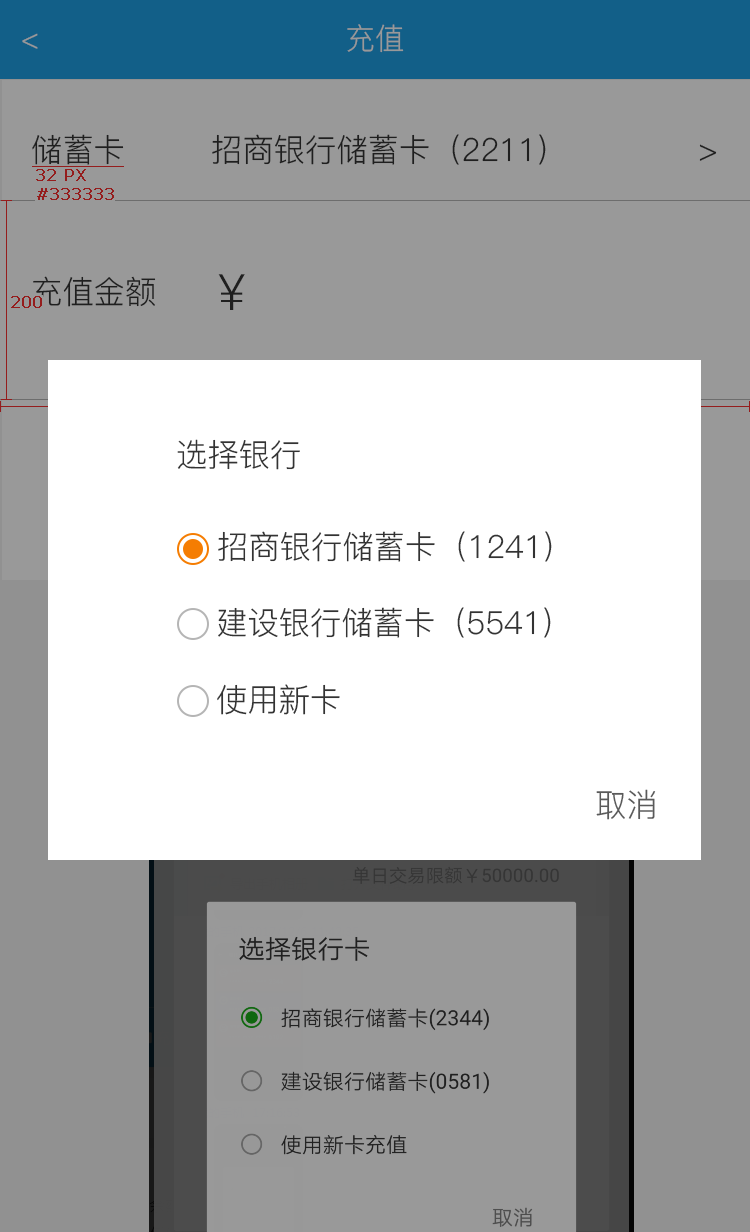
<style>
.page{position:relative;width:750px;height:1232px;background:#ffffff}
.page>*{position:absolute;margin:0}
.t1{font:30px "PingFang-SC-Regular";color:#999999}
.t2{font:32px "PingFang-SC-Regular";color:#333333}
.t3{font:16px "Verdana";color:#951d1d;font-weight:bold}
.t4{font:50px "PingFang-SC-Regular";color:#333333}
.t5{font:32px "PingFang-SC-Regular";color:#5a5a5a}
</style>
<div class="page">
<p class="t1" style="left:347px;top:24px;width:57px;height:29px">充值</p>
<p class="t1" style="left:22px;top:33px;width:16px;height:16px">&lt;</p>
<p class="t2" style="left:32px;top:134px;width:92px;height:31px">储蓄卡</p>
<p class="t2" style="left:212px;top:134px;width:505px;height:31px">招商银行储蓄卡（2211）              &gt;</p>
<p class="t3" style="left:36px;top:169px;width:78px;height:31px">32 PX<br>#333333</p>
<p class="t2" style="left:33px;top:276px;width:123px;height:31px">充值金额</p>
<p class="t4" style="left:218px;top:274px;width:27px;height:36px">¥</p>
<p class="t3" style="left:11px;top:296px;width:31px;height:12px">200</p>
<p class="t2" style="left:177px;top:439px;width:123px;height:31px">选择银行</p>
<p class="t2" style="left:218px;top:531px;width:334px;height:31px">招商银行储蓄卡（1241）</p>
<p class="t2" style="left:218px;top:607px;width:333px;height:31px">建设银行储蓄卡（5541）</p>
<p class="t2" style="left:217px;top:684px;width:123px;height:31px">使用新卡</p>
<p class="t5" style="left:596px;top:789px;width:60px;height:31px">取消</p>
</div>
